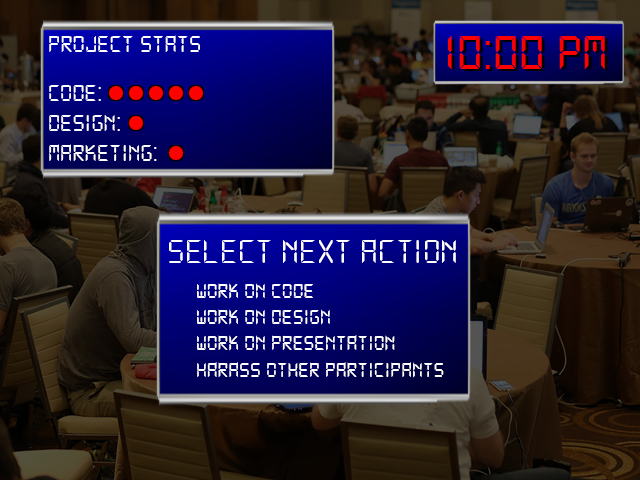
<style>
.page{position:relative;width:640px;height:480px}
.page>*{position:absolute;margin:0}
.t1{font:25px "DS-Digital";color:#ffffff}
.t2{font:52px "DS-Digital";color:#ff0000}
.t3{font:52px "DS-Digital";color:#000000}
.t4{font:36px "DS-Digital";color:#ffffff}
.t5{font:22px "DS-Digital";color:#ffffff}
</style>
<div class="page">
<p class="t1" style="left:49px;top:35px;width:151px;height:17px">PROJECT STATS</p>
<p class="t2" style="left:448px;top:36px;width:157px;height:33px">10:00 PM</p>
<p class="t3" style="left:451px;top:38px;width:157px;height:33px">10:00 PM</p>
<p class="t1" style="left:49px;top:85px;width:108px;height:76px">CODE:<br>DESIGN:<br>MARKETING:</p>
<p class="t4" style="left:169px;top:239px;width:287px;height:24px">SELECT NEXT ACTION</p>
<p class="t5" style="left:197px;top:283px;width:247px;height:95px">WORK ON CODE<br>WORK ON DESIGN<br>WORK ON PRESENTATION<br>HARASS OTHER PARTICIPANTS</p>
</div>
